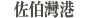
<style>
.page{position:relative;width:88px;height:18px;background:#ffffff}
.page>*{position:absolute;margin:0}
.t1{font:18px "RyuminPr6N-ExBold";color:#4c4843;scale:0.85 1}
</style>
<div class="page">
<p class="t1" style="left:14px;top:0px;width:61px;height:18px">佐伯灣港</p>
</div>
